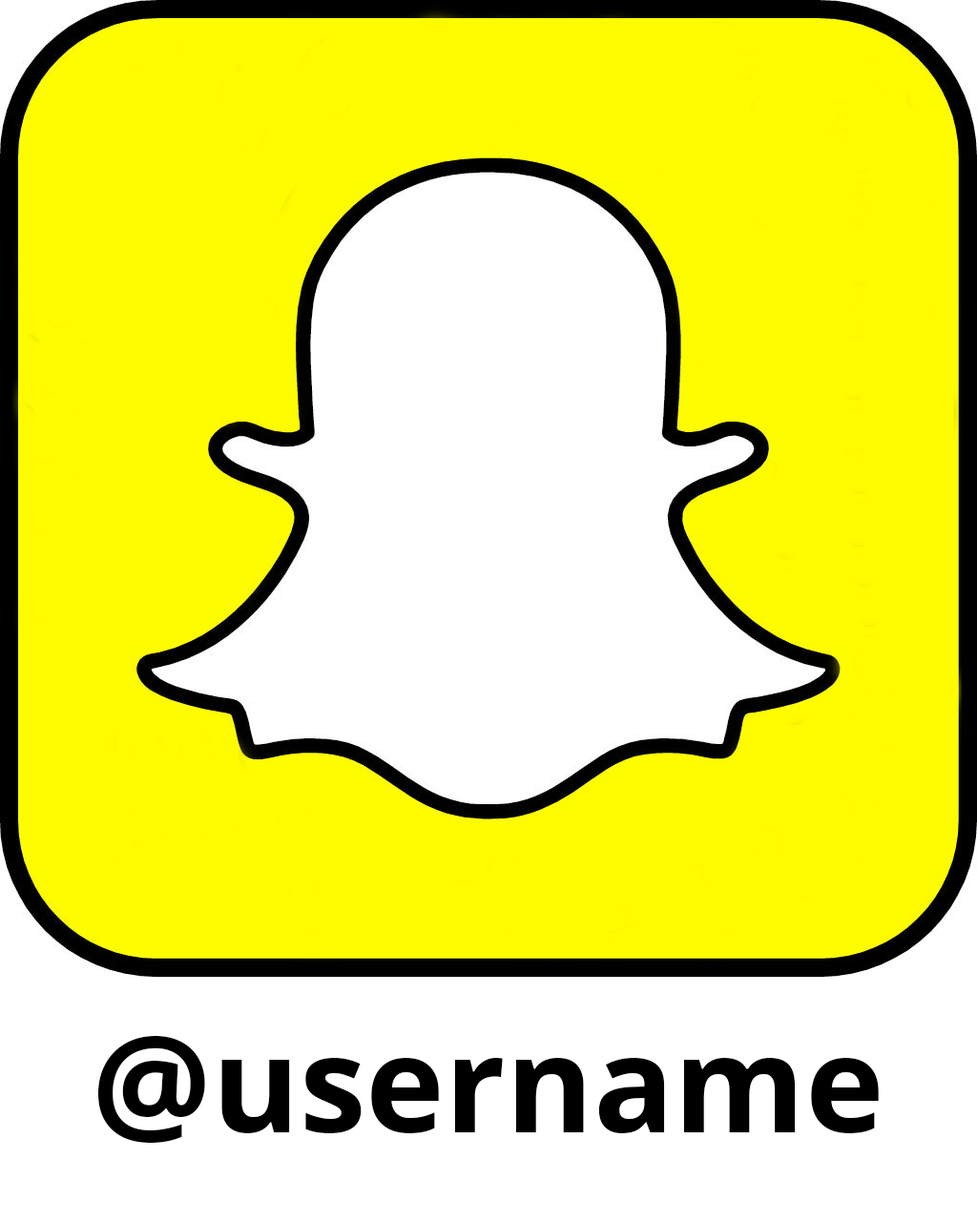
<style>
.page{position:relative;width:977px;height:1221px;background:#fffc00}
.page>*{position:absolute;margin:0}
.t1{font:133.5px "OpenSans-Bold";color:#000000}
</style>
<div class="page">
<p class="t1" style="left:97px;top:1036px;width:781px;height:107px">@username</p>
</div>
